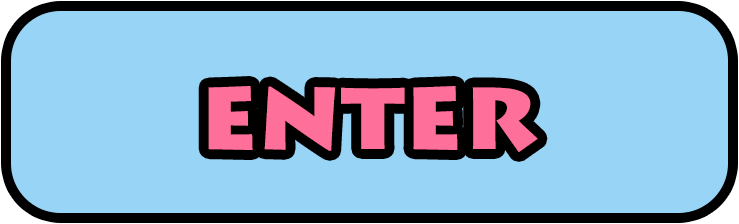
<style>
.page{position:relative;width:739px;height:224px;background:#97d4f6}
.page>*{position:absolute;margin:0}
.t1{font:101.7px "LithosPro-Black";color:#fe6f9a}
</style>
<div class="page">
<p class="t1" style="left:208px;top:86px;width:330px;height:66px">enter</p>
</div>
